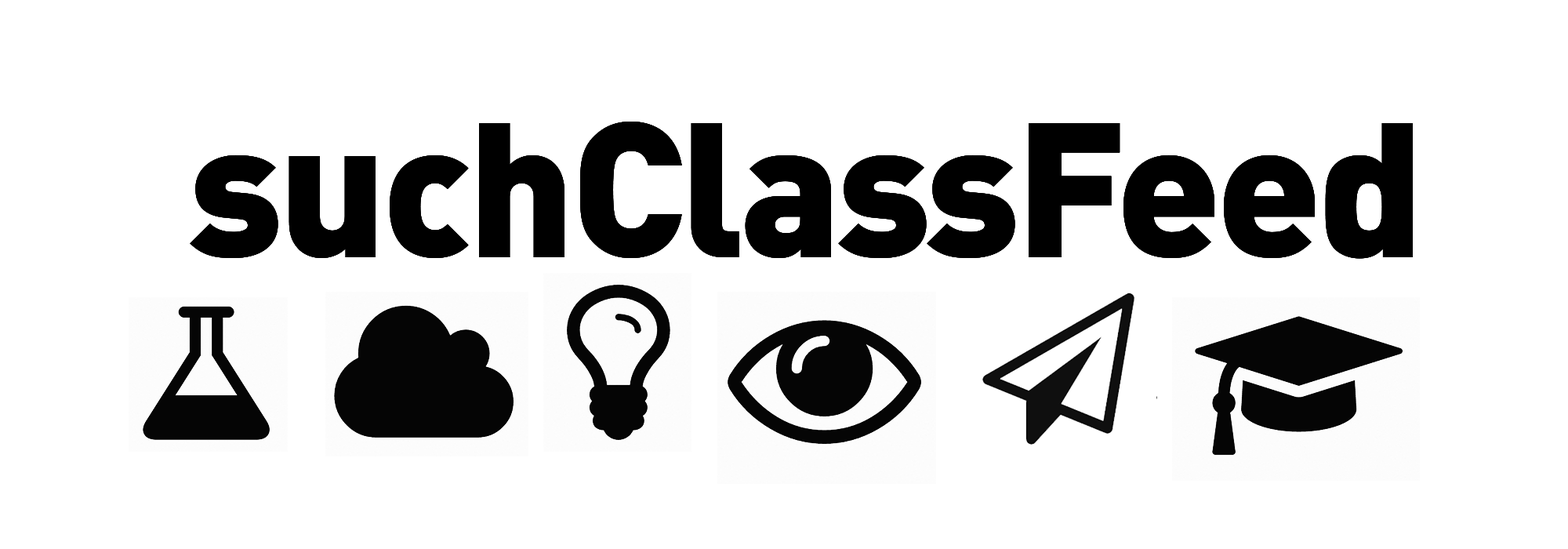
<style>
.page{position:relative;width:1568px;height:549px;background:#ffffff}
.page>*{position:absolute;margin:0}
.t1{font:188.2px "DINPro-Black";letter-spacing:-0.025em;color:#000000}
</style>
<div class="page">
<p class="t1" style="left:190px;top:122px;width:1223px;height:137px">suchClassFeed</p>
<p class="t1" style="left:190px;top:122px;width:1223px;height:137px">suchClassFeed</p>
</div>
